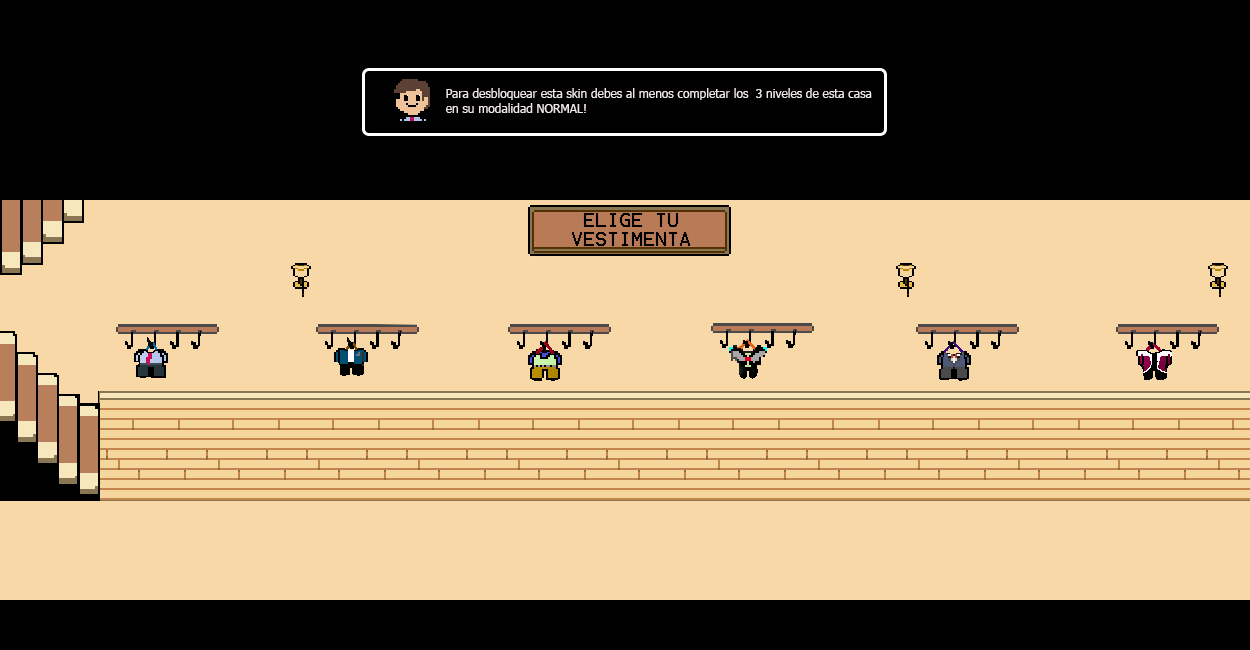
<style>
.page{position:relative;width:1250px;height:650px;background:#f8d8a7}
.page>*{position:absolute;margin:0}
.t1{font:12px "Tahoma";color:#f0e7e7}
</style>
<div class="page">
<p class="t1" style="left:446px;top:88px;width:426px;height:25px">Para desbloquear esta skin debes al menos completar los  3 niveles de esta casa<br>en su modalidad NORMAL!</p>
</div>
